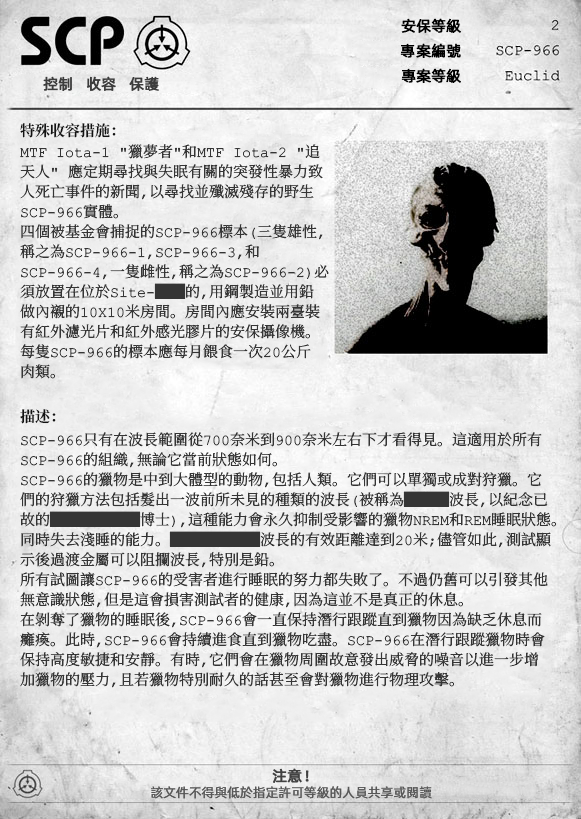
<style>
.page{position:relative;width:581px;height:819px}
.page>*{position:absolute;margin:0}
.t1{font:15px "AlibabaPuHuiTiR";color:#000000;font-weight:bold}
.t2{font:15px "AlibabaPuHuiTiR";color:#3d3d3d;font-weight:bold}
.t3{font:15px "ContainmentBreach-Bold";color:#121212}
.t4{font:15px/20px "ContainmentBreach-Regular";color:#353535}
.t5{font:15px "AlibabaPuHuiTiR";color:#414141;font-weight:bold}
.t6{font:13px "AlibabaPuHuiTiR";color:#575757}
</style>
<div class="page">
<p class="t1" style="left:401px;top:18px;width:60px;height:15px">安保等級</p>
<p class="t1" style="left:400px;top:43px;width:61px;height:15px">專案編號</p>
<p class="t2" style="left:43px;top:76px;width:116px;height:15px">控制   收容   保護</p>
<p class="t1" style="left:401px;top:68px;width:60px;height:15px">專案等級</p>
<p class="t3" style="left:20px;top:123px;width:96px;height:15px">特殊收容措施：</p>
<p class="t4" style="left:20px;top:144px;width:309px;height:235px">MTF Iota-1 "獵夢者"和MTF Iota-2 "追<br>天人" 應定期尋找與失眠有關的突發性暴力致<br>人死亡事件的新聞，以尋找並殲滅殘存的野生<br>SCP-966實體。<br>四個被基金會捕捉的SCP-966標本（三隻雄性，<br>稱之為SCP-966-1，SCP-966-3，和<br>SCP-966-4，一隻雌性，稱之為SCP-966-2）必<br>須放置在位於Site-██的，用鋼製造並用鉛<br>做內襯的10X10米房間。房間內應安裝兩臺裝<br>有紅外濾光片和紅外感光膠片的安保攝像機。<br>每隻SCP-966的標本應每月餵食一次20公斤<br>肉類。</p>
<p class="t3" style="left:20px;top:409px;width:36px;height:15px">描述：</p>
<p class="t4" style="left:20px;top:432px;width:536px;height:256px">SCP-966只有在波長範圍從700奈米到900奈米左右下才看得見。這適用於所有<br>SCP-966的組織，無論它當前狀態如何。<br>SCP-966的獵物是中到大體型的動物，包括人類。它們可以單獨或成對狩獵。它<br>們的狩獵方法包括髮出一波前所未見的種類的波長（被稱為███波長，以紀念已<br>故的██████博士），這種能力會永久抑制受影響的獵物NREM和REM睡眠狀態。<br>同時失去淺睡的能力。██████波長的有效距離達到20米；儘管如此，測試顯<br>示後過渡金屬可以阻攔波長，特別是鉛。<br>所有試圖讓SCP-966的受害者進行睡眠的努力都失敗了。不過仍舊可以引發其他<br>無意識狀態，但是這會損害測試者的健康，因為這並不是真正的休息。<br>在剝奪了獵物的睡眠後，SCP-966會一直保持潛行跟蹤直到獵物因為缺乏休息而<br>癱瘓。此時，SCP-966會持續進食直到獵物吃盡。SCP-966在潛行跟蹤獵物時會<br>保持高度敏捷和安靜。有時，它們會在獵物周圍故意發出威脅的噪音以進一步增<br>加獵物的壓力，且若獵物特別耐久的話甚至會對獵物進行物理攻擊。</p>
<p class="t5" style="left:272px;top:768px;width:37px;height:15px">注意！</p>
<p class="t6" style="left:151px;top:786px;width:281px;height:13px">該文件不得與低於指定許可等級的人員共享或閱讀</p>
</div>
